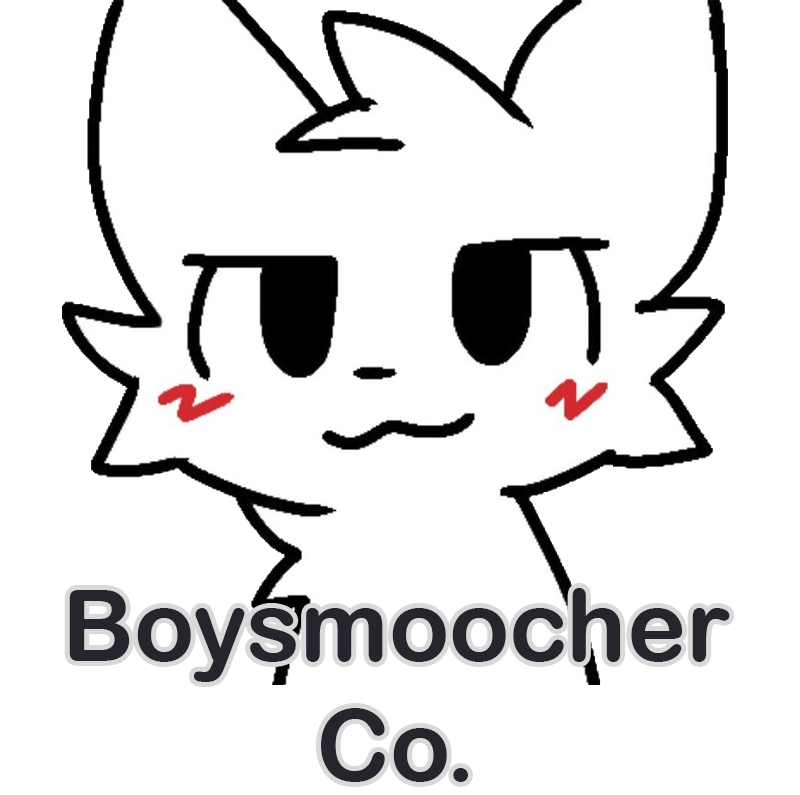
<style>
.page{position:relative;width:800px;height:795px;background:#ffffff}
.page>*{position:absolute;margin:0}
.t1{font:100px "ArialRoundedMTBold";color:#25252e}
</style>
<div class="page">
<p class="t1" style="left:69px;top:588px;width:661px;height:194px;text-align:center">Boysmoocher<br>Co.</p>
</div>
